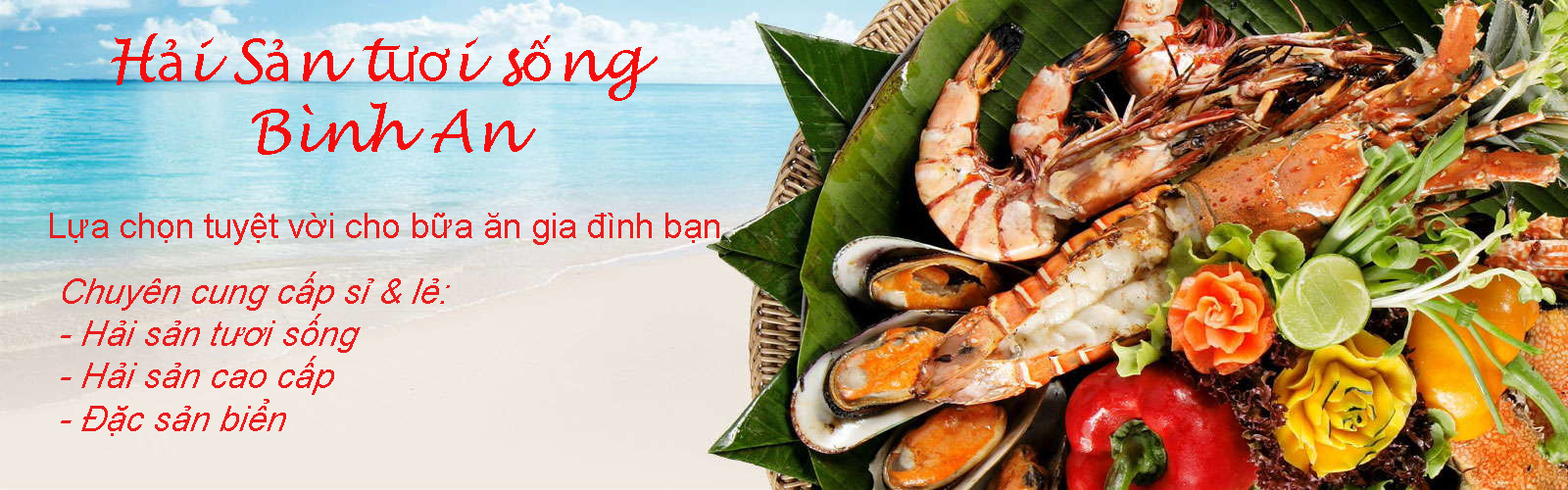
<style>
.page{position:relative;width:1568px;height:490px}
.page>*{position:absolute;margin:0}
.t1{font:58.8px "LucidaHandwriting-Italic";color:#f20e0e}
.t2{font:58.8px "MyriadPro-Regular";color:#f20e0e}
.t3{font:35.3px "ArialMT";color:#e71e1e}
.t4{font:35.3px "Arial-ItalicMT";color:#e71e1e;font-style:italic}
</style>
<div class="page">
<p class="t1" style="left:111px;top:33px;width:547px;height:122px;text-align:center">H<span class="t2">ả</span>i S<span class="t2">ả</span>n t<span class="t2">ươ</span>i s<span class="t2">ố</span>ng <br>Bình An</p>
<p class="t3" style="left:50px;top:213px;width:669px;height:32px">Lựa chọn tuyệt vời cho bữa ăn gia đình bạn</p>
<p class="t4" style="left:61px;top:271px;width:389px;height:165px">Chuyên cung cấp sỉ &amp; lẻ:<br>- Hải sản tươi sống<br>- Hải sản cao cấp<br>- Đặc sản biển</p>
</div>
